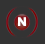
<style>
.page{position:relative;width:45px;height:44px;background:#333333}
.page>*{position:absolute;margin:0}
.t1{font:12.2px "Arial-Black";color:#ffffff}
</style>
<div class="page">
<p class="t1" style="left:18px;top:17px;width:8px;height:9px">N</p>
</div>
